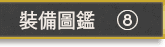
<style>
.page{position:relative;width:165px;height:47px;background:#3f3f3f}
.page>*{position:absolute;margin:0}
.t1{font:20px "GothicMB101Pro-Regular";color:#f2ebe5;scale:0.95 1}
</style>
<div class="page">
<p class="t1" style="left:19px;top:10px;width:76px;height:20px">裝備圖鑑</p>
</div>
